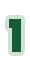
<style>
.page{position:relative;width:30px;height:70px;background:#ffffff}
.page>*{position:absolute;margin:0}
.t1{font:42.2px "04b19";color:#185b37}
</style>
<div class="page">
<p class="t1" style="left:9px;top:19px;width:12px;height:33px">1</p>
</div>
